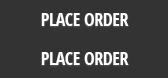
<style>
.page{position:relative;width:168px;height:78px;background:#333333}
.page>*{position:absolute;margin:0}
.t1{font:18px "OpenSans-CondensedBold";letter-spacing:-0.025em;color:#ffffff;text-transform:uppercase}
</style>
<div class="page">
<p class="t1" style="left:41px;top:13px;width:88px;height:13px">Place order</p>
<p class="t1" style="left:41px;top:52px;width:88px;height:13px">Place order</p>
</div>
